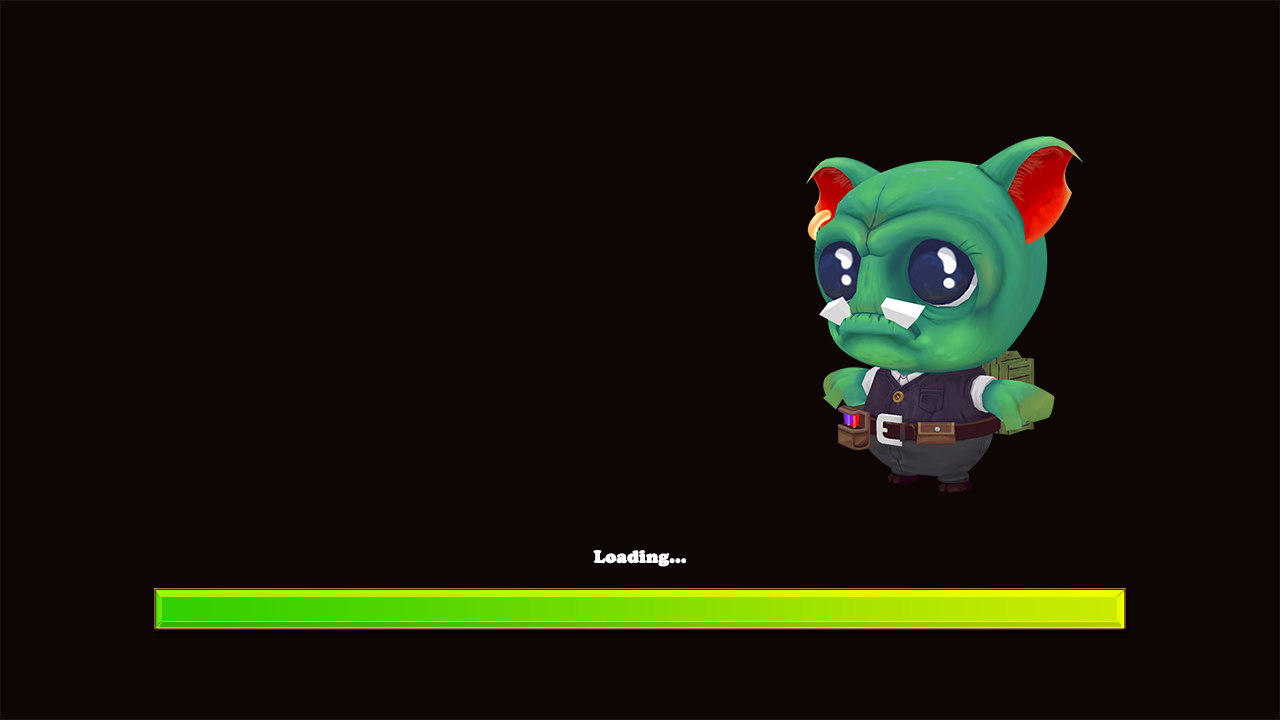
<style>
.page{position:relative;width:1280px;height:720px;background:#0e0604}
.page>*{position:absolute;margin:0}
.t1{font:17px "CooperBlackStd";color:#ffffff;font-weight:bold}
</style>
<div class="page">
<p class="t1" style="left:593px;top:550px;width:93px;height:17px">Loading...</p>
</div>
